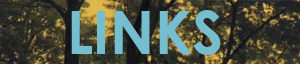
<style>
.page{position:relative;width:300px;height:64px}
.page>*{position:absolute;margin:0}
.t1{font:60px "CenturyGothic-Bold";color:#76bdcf}
</style>
<div class="page">
<p class="t1" style="left:71px;top:10px;width:150px;height:45px">LINKS</p>
</div>
